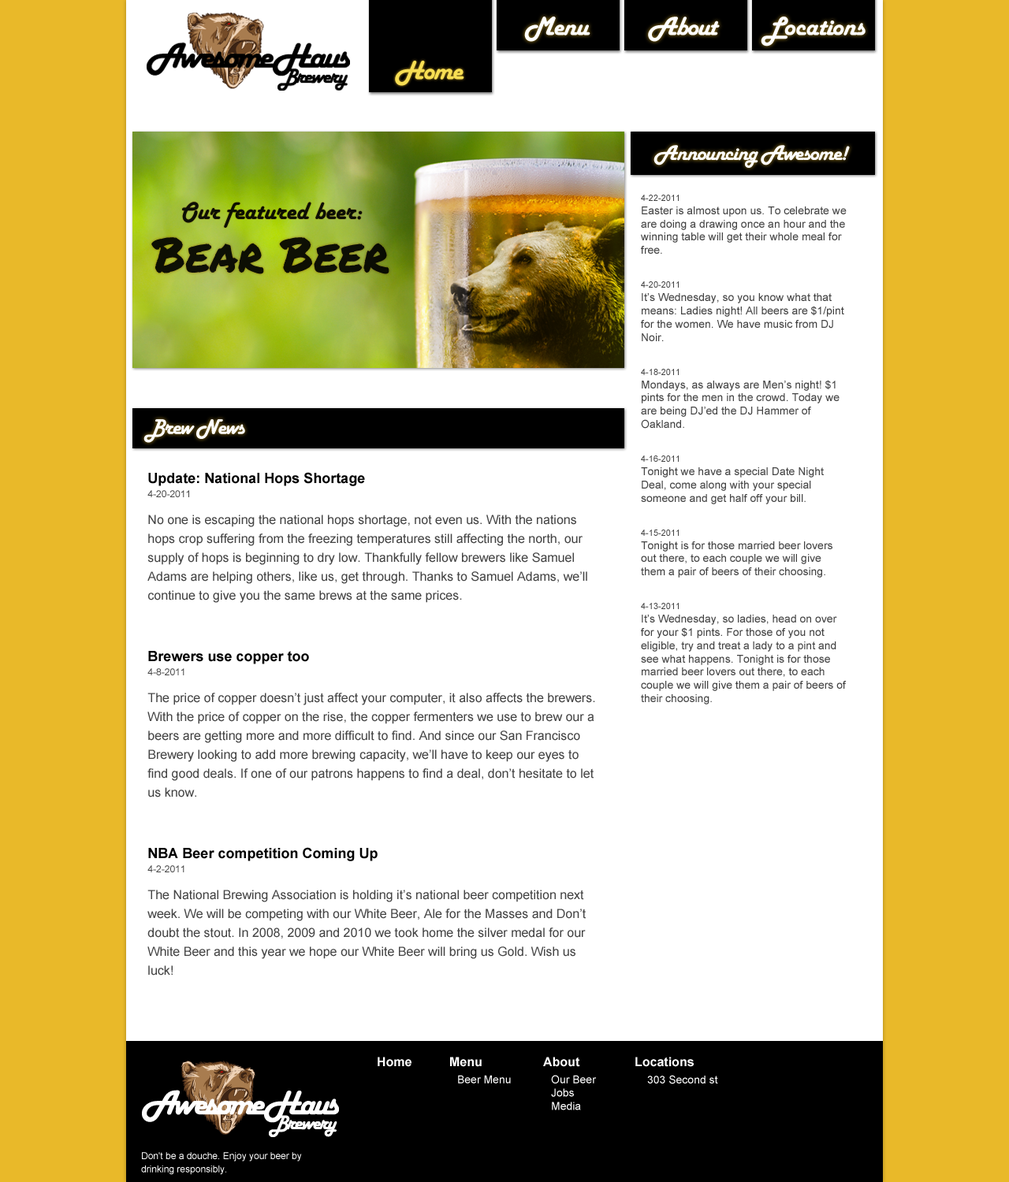
<style>
.page{position:relative;width:1009px;height:1182px;background:#ffffff}
.page>*{position:absolute;margin:0}
.t1{font:27.6px "HarlowSolid";letter-spacing:-0.04em;color:#ffffff}
.t2{font:27.6px "HarlowSolid";letter-spacing:-0.04em;color:#f7de53}
.t3{font:22.1px "HarlowSolid";letter-spacing:-0.04em;color:#ffffff}
.t4{font:11px "ArialMT";color:#444444}
.t5{font:8.7px "ArialMT";color:#444444}
.t6{font:12.6px/18.9px "ArialMT";color:#444444}
.t7{font:14.2px/14.2px "Arial-BoldMT";color:#000000}
.t8{font:9.5px/14.2px "ArialMT";color:#444444}
.t9{font:12.6px "Arial-BoldMT";color:#ffffff}
.t10{font:11px "ArialMT";color:#ffffff}
.t11{font:9.5px/13.2px "ArialMT";color:#ffffff}
</style>
<div class="page">
<p class="t1" style="left:524px;top:17px;width:66px;height:25px">Menu</p>
<p class="t1" style="left:648px;top:17px;width:72px;height:25px">About</p>
<p class="t1" style="left:760px;top:17px;width:105px;height:29px">Locations</p>
<p class="t2" style="left:395px;top:61px;width:69px;height:25px">Home</p>
<p class="t3" style="left:653px;top:145px;width:197px;height:23px">Announcing Awesome!</p>
<p class="t4" style="left:641px;top:195px;width:205px;height:510px"><span class="t5">4-22-2011<br></span>Easter is almost upon us. To celebrate we are doing a drawing once an hour and the winning table will get their whole meal for free.<br><span class="t5">4-20-2011<br></span>It’s Wednesday, so you know what that means: Ladies night! All beers are $1/pint for the women. We have music from DJ Noir. <br><span class="t5">4-18-2011<br></span>Mondays, as always are Men’s night! $1 pints for the men in the crowd. Today we are being DJ’ed the DJ Hammer of Oakland. <br><span class="t5">4-16-2011 <br></span>Tonight we have a special Date Night Deal, come along with your special someone and get half off your bill. <br><span class="t5">4-15-2011<br></span>Tonight is for those married beer lovers out there, to each couple we will give them a pair of beers of their choosing.<br><span class="t5">4-13-2011</span><br>It’s Wednesday, so ladies, head on over for your $1 pints. For those of you not eligible, try and treat a lady to a pint and see what happens. Tonight is for those married beer lovers out there, to each couple we will give them a pair of beers of their choosing.</p>
<p class="t3" style="left:143px;top:419px;width:102px;height:24px">Brew News</p>
<p class="t6" style="left:147px;top:472px;width:448px;height:504px"><span class="t7">Update: National Hops Shortage   <br></span><span class="t8">4-20-2011<br></span>No one is escaping the national hops shortage, not even us. With the nations hops crop suffering from the freezing temperatures still affecting the north, our supply of hops is beginning to dry low. Thankfully fellow brewers like Samuel Adams are helping others, like us, get through. Thanks to Samuel Adams, we’ll continue to give you the same brews at the same prices. <br><span class="t7">Brewers use copper too   <br></span><span class="t8">4-8-2011<br></span>The price of copper doesn’t just affect your computer, it also affects the brewers. With the price of copper on the rise, the copper fermenters we use to brew our a beers are getting more and more difficult to find. And since our San Francisco Brewery looking to add more brewing capacity, we’ll have to keep our eyes to find good deals. If one of our patrons happens to find a deal, don’t hesitate to let us know. <br><span class="t7">NBA Beer competition Coming Up  <br></span><span class="t8">4-2-2011<br></span>The National Brewing Association is holding it’s national beer competition next week. We will be competing with our White Beer, Ale for the Masses and Don’t doubt the stout. In 2008, 2009 and 2010 we took home the silver medal for our White Beer and this year we hope our White Beer will bring us Gold. Wish us luck!</p>
<p class="t9" style="left:377px;top:1057px;width:34px;height:10px">Home</p>
<p class="t10" style="left:450px;top:1057px;width:61px;height:27px"><span class="t9">Menu<br></span>Beer Menu</p>
<p class="t10" style="left:543px;top:1057px;width:54px;height:53px"><span class="t9">About<br></span>Our Beer<br>Jobs<br>Media</p>
<p class="t9" style="left:635px;top:1057px;width:59px;height:10px">Locations</p>
<p class="t10" style="left:647px;top:1075px;width:71px;height:9px">303 Second st</p>
<p class="t11" style="left:141px;top:1152px;width:161px;height:23px">Don't be a douche. Enjoy your beer by drinking responsibly.</p>
</div>
